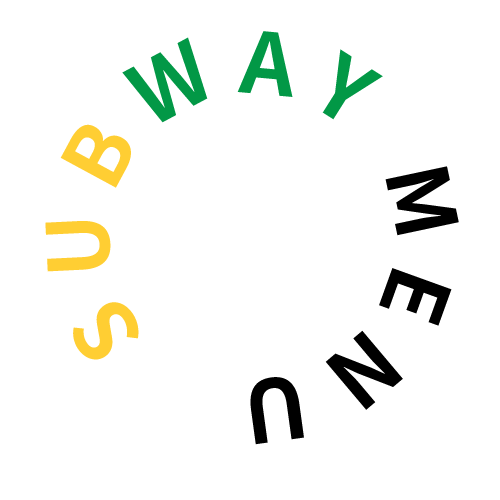
<style>
.page{position:relative;width:500px;height:500px;background:#ffffff}
.page>*{position:absolute;margin:0}
.t1{font:85px/27.5px "NotoSansKR-Bold";letter-spacing:0.2em;color:#000000}
.t2{font:85px/27.5px "NotoSansKR-Bold";letter-spacing:0.2em;color:#ffce33}
.t3{font:85px/27.5px "NotoSansKR-Bold";letter-spacing:0.2em;color:#029846}
</style>
<div class="page">
<p class="t1" style="left:45px;top:31px;width:414px;height:414px;text-align:center"><span class="t2">SUB</span><span class="t3">WAY</span> MENU</p>
</div>
